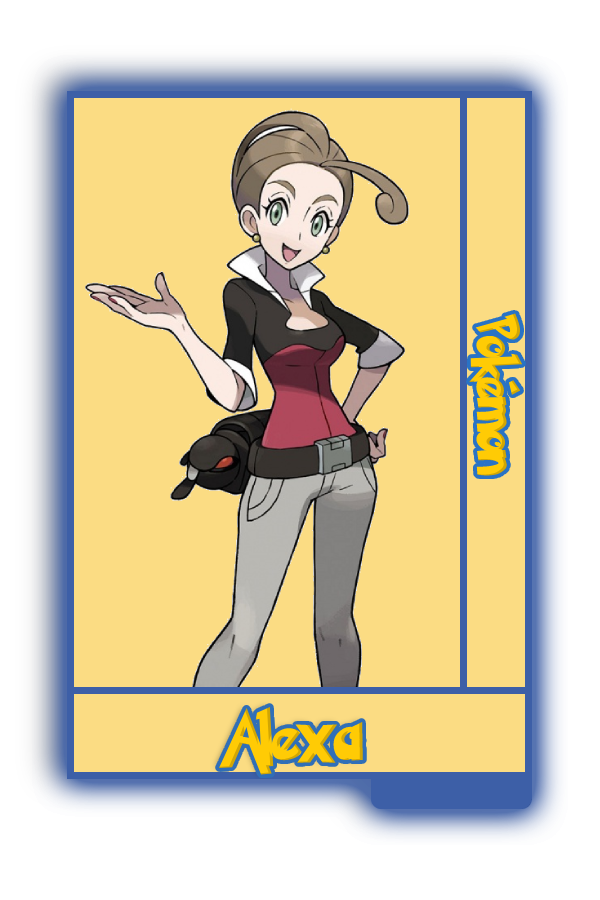
<style>
.page{position:relative;width:600px;height:900px;background:#fbdc83}
.page>*{position:absolute;margin:0}
.t1{font:48.8px "PokemonSolidNormal";color:#ffcb05;scale:0.8 1}
.t2{font:56.6px "PokemonSolidNormal";color:#ffcb05;scale:0.92 1}
</style>
<div class="page">
<p class="t1" style="left:469px;top:313px;width:54px;height:163px;rotate:90deg">Pokémon</p>
<p class="t2" style="left:218px;top:706px;width:145px;height:69px">Alexa</p>
</div>
